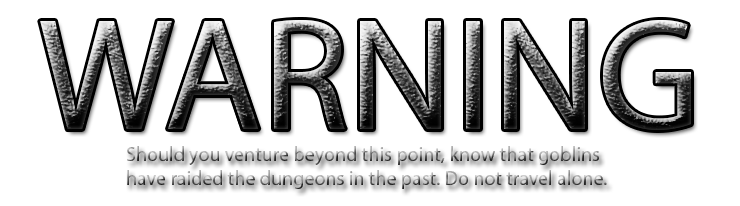
<style>
.page{position:relative;width:740px;height:206px;background:#ffffff}
.page>*{position:absolute;margin:0}
.t1{font:160px "MyriadPro-Regular"}
.t2{font:20px "MyriadPro-Regular"}
</style>
<div class="page">
<p class="t1" style="left:40px;top:20px;width:651px;height:110px">WARNING</p>
<p class="t2" style="left:127px;top:146px;width:480px;height:43px">Should you venture beyond this point, know that goblins         have raided the dungeons in the past. Do not travel alone.</p>
</div>
